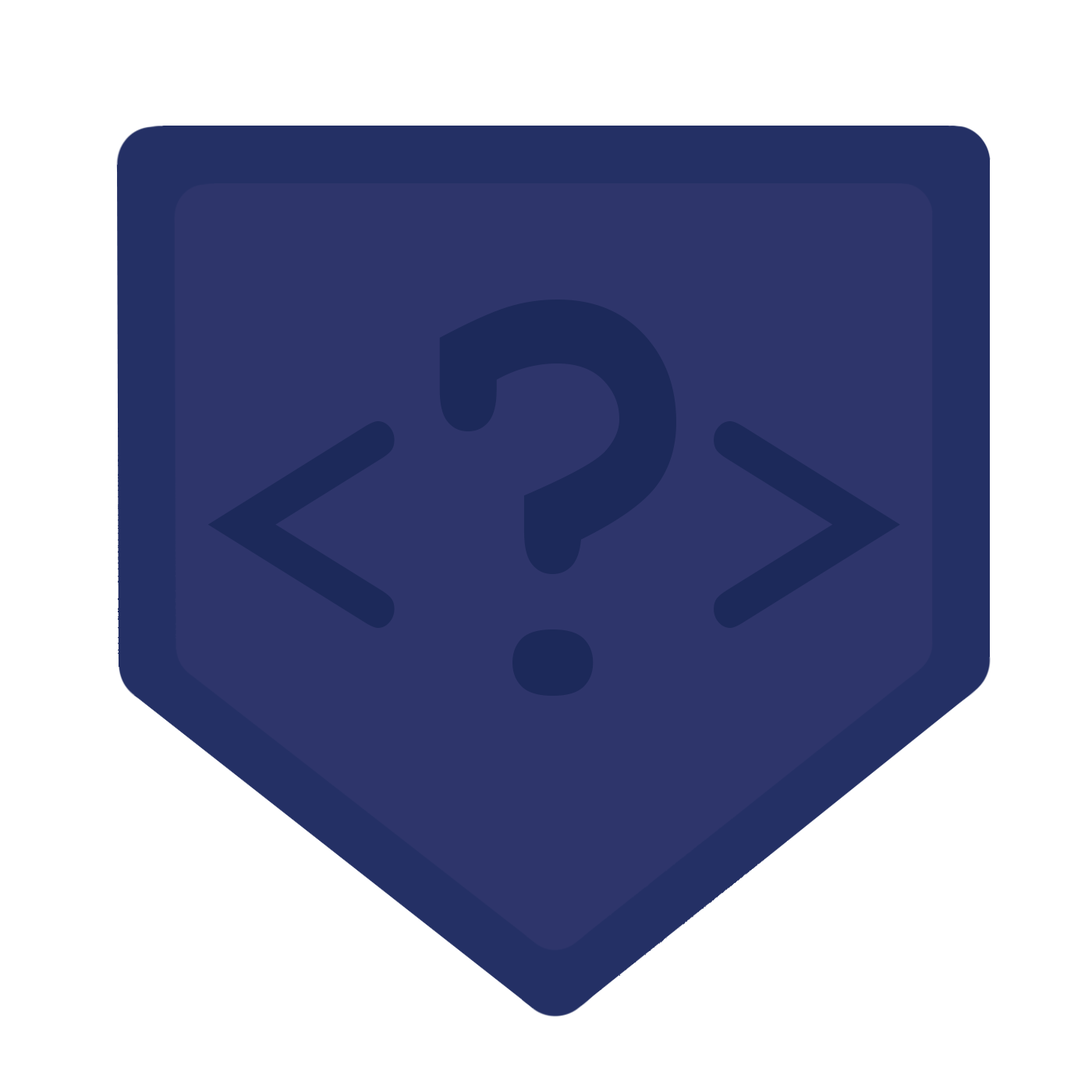
<style>
.page{position:relative;width:1092px;height:1092px;background:#ffffff}
.page>*{position:absolute;margin:0}
.t1{font:364px "CourierNewPS-BoldMT";letter-spacing:-0.08em;color:#1c295a;scale:0.89 1}
.t2{font:637px "CourierNewPS-BoldMT";letter-spacing:-0.04em;color:#1c295a;scale:0.89 1}
.t3{font:364px "CourierNewPS-BoldMT";letter-spacing:-0.04em;color:#1c295a;scale:0.89 1}
</style>
<div class="page">
<p class="t1" style="left:207px;top:300px;width:693px;height:396px">&lt;<span class="t2">?</span><span class="t3">&gt;</span></p>
</div>
